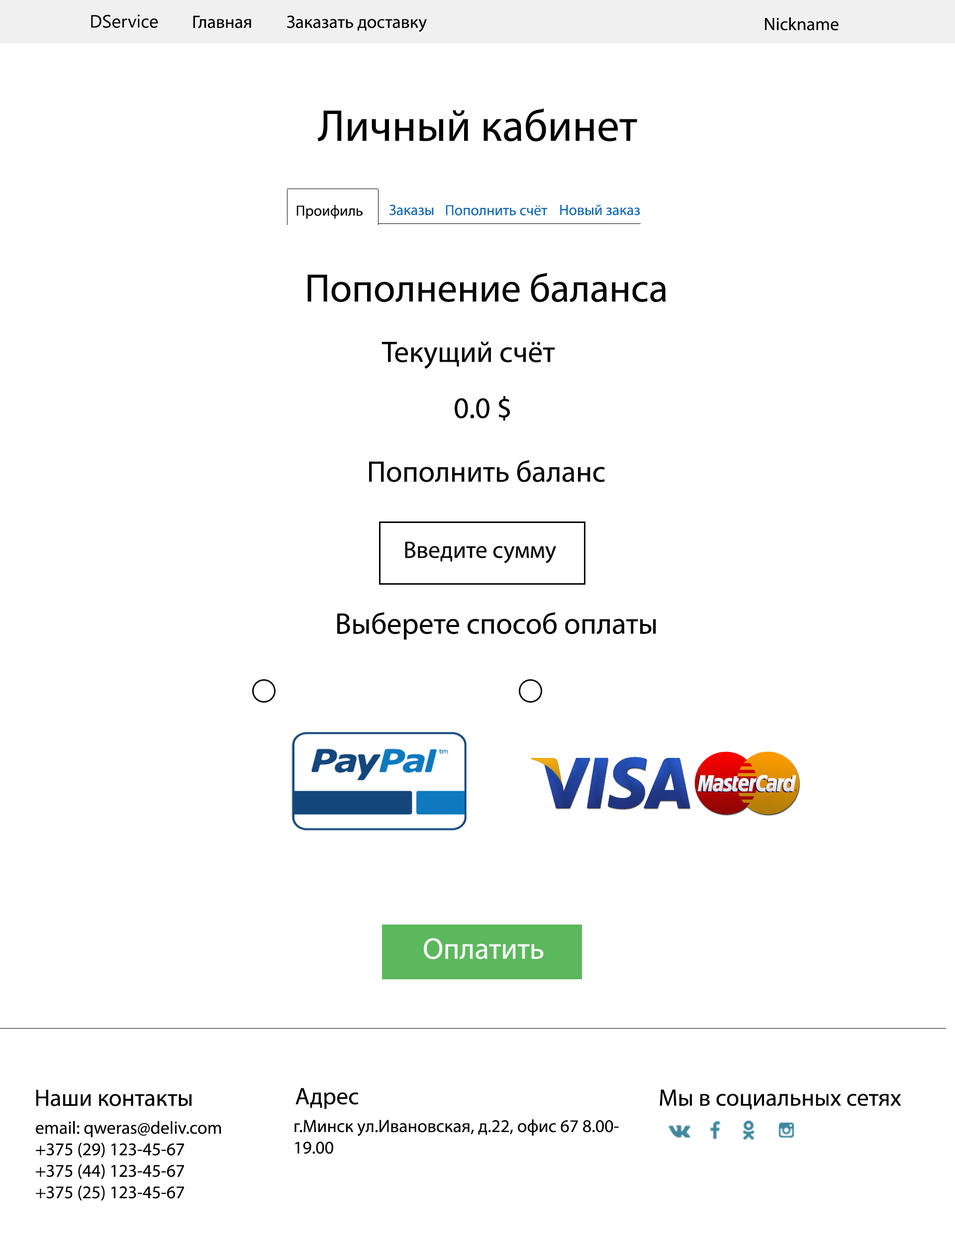
<style>
.page{position:relative;width:955px;height:1248px;background:#ffffff}
.page>*{position:absolute;margin:0}
.t1{font:17.9px "LeelawadeeUI";color:#010101}
.t2{font:17.9px "MyriadPro-Regular";color:#000000}
.t3{font:44.8px "MyriadPro-Regular";color:#000000}
.t4{font:14.9px "MyriadPro-Regular";color:#000000}
.t5{font:14.9px "MyriadPro-Regular";color:#0b69b6}
.t6{font:39.8px "MyriadPro-Regular";color:#050505}
.t7{font:29.9px "MyriadPro-Regular";color:#050505}
.t8{font:23.9px "MyriadPro-Regular";color:#050505}
.t9{font:29.9px "MyriadPro-Regular";color:#fbfbfb}
.t10{font:23.9px "MyriadPro-Regular";color:#000000}
</style>
<div class="page">
<p class="t1" style="left:91px;top:14px;width:67px;height:14px">DService</p>
<p class="t2" style="left:193px;top:15px;width:58px;height:13px">Главная</p>
<p class="t2" style="left:287px;top:15px;width:140px;height:17px">Заказать доставку</p>
<p class="t2" style="left:765px;top:17px;width:74px;height:13px">Nickname</p>
<p class="t3" style="left:317px;top:108px;width:320px;height:33px">Личный кабинет</p>
<p class="t4" style="left:297px;top:205px;width:66px;height:14px">Проифиль</p>
<p class="t5" style="left:389px;top:205px;width:45px;height:10px">Заказы</p>
<p class="t5" style="left:446px;top:205px;width:102px;height:10px">Пополнить счёт</p>
<p class="t5" style="left:560px;top:205px;width:80px;height:10px">Новый заказ</p>
<p class="t6" style="left:308px;top:273px;width:358px;height:29px">Пополнение баланса</p>
<p class="t7" style="left:382px;top:341px;width:173px;height:28px">Текущий счёт</p>
<p class="t7" style="left:455px;top:396px;width:56px;height:25px">0.0 $</p>
<p class="t7" style="left:369px;top:460px;width:236px;height:22px">Пополнить баланс</p>
<p class="t8" style="left:405px;top:541px;width:152px;height:22px">Введите сумму</p>
<p class="t7" style="left:337px;top:612px;width:319px;height:28px">Выберете способ оплаты</p>
<p class="t9" style="left:424px;top:938px;width:120px;height:21px">Оплатить</p>
<p class="t10" style="left:36px;top:1090px;width:156px;height:16px">Наши контакты</p>
<p class="t10" style="left:296px;top:1088px;width:63px;height:21px">Адрес</p>
<p class="t10" style="left:660px;top:1089px;width:242px;height:21px">Мы в социальных сетях</p>
<p class="t2" style="left:36px;top:1121px;width:185px;height:80px">email: qweras@deliv.com<br>+375 (29) 123-45-67<br>+375 (44) 123-45-67<br>+375 (25) 123-45-67</p>
<p class="t2" style="left:295px;top:1119px;width:324px;height:35px">г.Минск ул.Ивановская, д.22, офис 67 8.00- <br>19.00</p>
</div>
